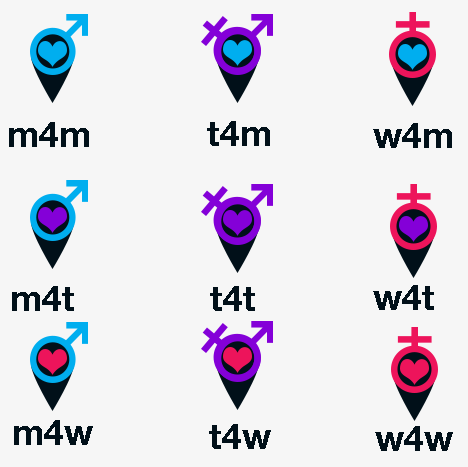
<style>
.page{position:relative;width:468px;height:467px;background:#f6f6f6}
.page>*{position:absolute;margin:0}
.t1{font:36px "HelveticaNeue-Bold";color:#011019}
</style>
<div class="page">
<p class="t1" style="left:9px;top:122px;width:80px;height:25px">m4m</p>
<p class="t1" style="left:207px;top:121px;width:63px;height:25px">t4m</p>
<p class="t1" style="left:373px;top:123px;width:79px;height:25px">w4m</p>
<p class="t1" style="left:12px;top:286px;width:62px;height:25px">m4t</p>
<p class="t1" style="left:210px;top:286px;width:45px;height:25px">t4t</p>
<p class="t1" style="left:373px;top:285px;width:61px;height:25px">w4t</p>
<p class="t1" style="left:14px;top:420px;width:79px;height:25px">m4w</p>
<p class="t1" style="left:209px;top:424px;width:62px;height:25px">t4w</p>
<p class="t1" style="left:375px;top:426px;width:78px;height:25px">w4w</p>
</div>
